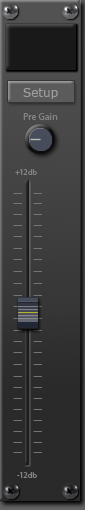
<style>
.page{position:relative;width:85px;height:510px}
.page>*{position:absolute;margin:0}
.t1{font:12px "Verdana";color:#9e9e9e}
.t2{font:10px "MyriadPro-Regular";color:#838383}
.t3{font:8px "MyriadPro-Regular";color:#838383}
</style>
<div class="page">
<p class="t1" style="left:23px;top:88px;width:35px;height:11px">Setup</p>
<p class="t2" style="left:23px;top:113px;width:35px;height:7px">Pre Gain</p>
<p class="t3" style="left:15px;top:169px;width:22px;height:6px">+12db</p>
<p class="t3" style="left:17px;top:472px;width:20px;height:6px">-12db</p>
</div>
